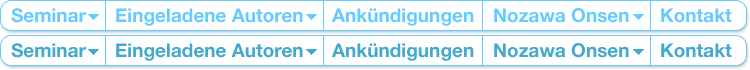
<style>
.page{position:relative;width:750px;height:70px;background:#ffffff}
.page>*{position:absolute;margin:0}
.t1{font:19px "HelveticaNeue-Bold";color:#66ccff}
.t2{font:19px "HelveticaNeue-Bold";color:#44aacc}
</style>
<div class="page">
<p class="t1" style="left:11px;top:8px;width:75px;height:15px">Seminar</p>
<p class="t1" style="left:116px;top:8px;width:187px;height:18px">Eingeladene Autoren</p>
<p class="t1" style="left:332px;top:8px;width:142px;height:18px">Ankündigungen</p>
<p class="t1" style="left:494px;top:8px;width:135px;height:15px">Nozawa Onsen</p>
<p class="t1" style="left:661px;top:8px;width:71px;height:15px">Kontakt</p>
<p class="t2" style="left:11px;top:43px;width:75px;height:15px">Seminar</p>
<p class="t2" style="left:116px;top:43px;width:187px;height:18px">Eingeladene Autoren</p>
<p class="t2" style="left:332px;top:43px;width:142px;height:18px">Ankündigungen</p>
<p class="t2" style="left:494px;top:43px;width:135px;height:15px">Nozawa Onsen</p>
<p class="t2" style="left:661px;top:43px;width:71px;height:15px">Kontakt</p>
</div>
